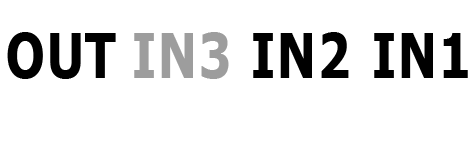
<style>
.page{position:relative;width:472px;height:157px;background:#ffffff}
.page>*{position:absolute;margin:0}
.t1{font:61.5px "Tahoma-Bold";letter-spacing:0.04em;color:#000000;scale:0.81 1}
.t2{font:61.5px "Tahoma-Bold";letter-spacing:0.04em;color:#9d9d9d;scale:0.81 1}
</style>
<div class="page">
<p class="t1" style="left:7px;top:32px;width:109px;height:47px">OUT</p>
<p class="t2" style="left:134px;top:32px;width:95px;height:47px">IN3</p>
<p class="t1" style="left:253px;top:32px;width:96px;height:46px">IN2</p>
<p class="t1" style="left:374px;top:33px;width:94px;height:45px">IN1</p>
</div>
